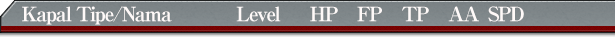
<style>
.page{position:relative;width:615px;height:37px}
.page>*{position:absolute;margin:0}
.t1{font:20px "RyuminPro-ExBold";letter-spacing:-0.08em;color:#fef9f8}
</style>
<div class="page">
<p class="t1" style="left:22px;top:6px;width:502px;height:19px">Kapal Tipe/Nama             Level      HP    FP    TP    AA  SPD</p>
</div>
